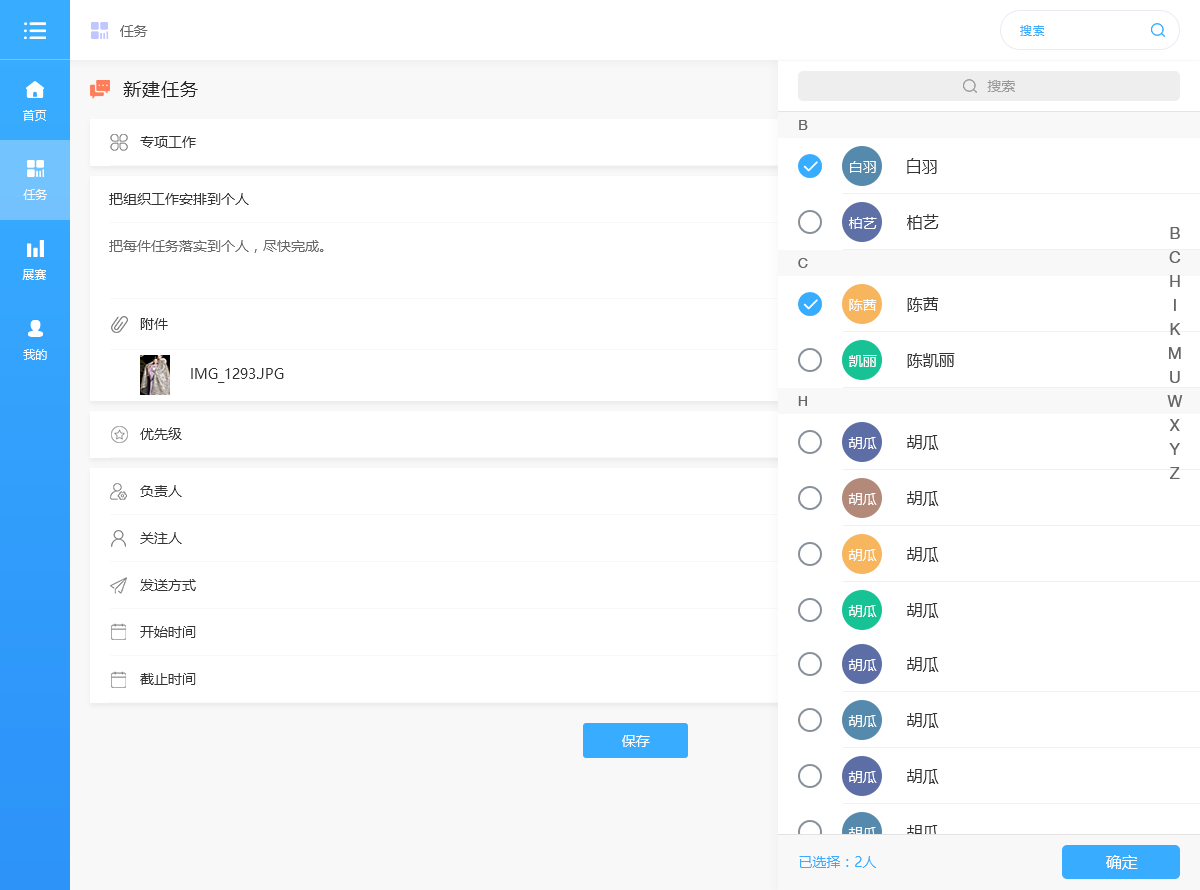
<style>
.page{position:relative;width:1200px;height:890px;background:#ffffff}
.page>*{position:absolute;margin:0}
.t1{font:14px "MicrosoftYaHei";color:#666666}
.t2{font:12px "MicrosoftYaHei";letter-spacing:0.05em;color:#38adff}
.t3{font:18px "MicrosoftYaHei";letter-spacing:0.05em;color:#222222}
.t4{font:14px "MicrosoftYaHei";color:#999999}
.t5{font:12px "MicrosoftYaHei";color:#ffffff}
.t6{font:14px "HelveticaNeueLTPro-Roman";color:#666666}
.t7{font:14px "MicrosoftYaHei";color:#333333}
.t8{font:14px "MicrosoftYaHei";color:#fffefe}
.t9{font:16px "MicrosoftYaHei";color:#333333}
.t10{font:16px/24px "HelveticaNeueLTPro-Roman";color:#666666}
.t11{font:14px "MicrosoftYaHei";color:#ffffff}
.t12{font:14px "MicrosoftYaHei";color:#38adff}
.t13{font:16px "MicrosoftYaHei";color:#ffffff}
</style>
<div class="page">
<p class="t1" style="left:120px;top:25px;width:28px;height:12px">任务</p>
<p class="t2" style="left:1020px;top:25px;width:25px;height:11px">搜索</p>
<p class="t3" style="left:123px;top:81px;width:75px;height:17px">新建任务</p>
<p class="t4" style="left:987px;top:80px;width:28px;height:12px">搜索</p>
<p class="t5" style="left:23px;top:110px;width:24px;height:11px">首页</p>
<p class="t6" style="left:799px;top:120px;width:9px;height:10px">B</p>
<p class="t7" style="left:140px;top:136px;width:56px;height:12px">专项工作</p>
<p class="t8" style="left:850px;top:161px;width:26px;height:12px">白羽</p>
<p class="t9" style="left:907px;top:158px;width:30px;height:16px">白羽</p>
<p class="t5" style="left:23px;top:189px;width:24px;height:11px">任务</p>
<p class="t7" style="left:109px;top:193px;width:140px;height:12px">把组织工作安排到个人</p>
<p class="t8" style="left:849px;top:217px;width:28px;height:12px">柏艺</p>
<p class="t9" style="left:907px;top:214px;width:32px;height:16px">柏艺</p>
<p class="t10" style="left:1167px;top:227px;width:16px;height:252px;text-align:center">B<br>C<br>H<br>I<br>K<br>M<br>U<br>W<br>X<br>Y<br>Z</p>
<p class="t1" style="left:109px;top:240px;width:215px;height:13px">把每件任务落实到个人，尽快完成。</p>
<p class="t5" style="left:22px;top:269px;width:24px;height:11px">展赛</p>
<p class="t6" style="left:798px;top:258px;width:10px;height:10px">C</p>
<p class="t8" style="left:849px;top:299px;width:28px;height:12px">陈茜</p>
<p class="t9" style="left:907px;top:297px;width:32px;height:15px">陈茜</p>
<p class="t7" style="left:140px;top:318px;width:28px;height:12px">附件</p>
<p class="t5" style="left:23px;top:349px;width:24px;height:11px">我的</p>
<p class="t9" style="left:907px;top:353px;width:48px;height:15px">陈凯丽</p>
<p class="t8" style="left:849px;top:355px;width:28px;height:12px">凯丽</p>
<p class="t7" style="left:191px;top:368px;width:93px;height:15px">IMG_1293.JPG</p>
<p class="t6" style="left:798px;top:396px;width:9px;height:10px">H</p>
<p class="t7" style="left:140px;top:427px;width:42px;height:13px">优先级</p>
<p class="t8" style="left:848px;top:437px;width:29px;height:12px">胡瓜</p>
<p class="t9" style="left:907px;top:435px;width:32px;height:15px">胡瓜</p>
<p class="t7" style="left:140px;top:485px;width:42px;height:12px">负责人</p>
<p class="t8" style="left:848px;top:493px;width:29px;height:12px">胡瓜</p>
<p class="t9" style="left:907px;top:491px;width:32px;height:15px">胡瓜</p>
<p class="t7" style="left:140px;top:532px;width:42px;height:12px">关注人</p>
<p class="t8" style="left:848px;top:549px;width:29px;height:12px">胡瓜</p>
<p class="t9" style="left:907px;top:547px;width:32px;height:15px">胡瓜</p>
<p class="t7" style="left:140px;top:579px;width:56px;height:12px">发送方式</p>
<p class="t8" style="left:848px;top:605px;width:29px;height:12px">胡瓜</p>
<p class="t9" style="left:907px;top:603px;width:32px;height:15px">胡瓜</p>
<p class="t7" style="left:140px;top:626px;width:56px;height:12px">开始时间</p>
<p class="t8" style="left:848px;top:659px;width:29px;height:12px">胡瓜</p>
<p class="t9" style="left:907px;top:657px;width:32px;height:15px">胡瓜</p>
<p class="t7" style="left:140px;top:673px;width:56px;height:12px">截止时间</p>
<p class="t9" style="left:907px;top:713px;width:32px;height:15px">胡瓜</p>
<p class="t8" style="left:848px;top:715px;width:29px;height:12px">胡瓜</p>
<p class="t11" style="left:622px;top:735px;width:28px;height:12px">保存</p>
<p class="t8" style="left:848px;top:771px;width:29px;height:12px">胡瓜</p>
<p class="t9" style="left:907px;top:769px;width:32px;height:15px">胡瓜</p>
<p class="t8" style="left:848px;top:827px;width:29px;height:12px">胡瓜</p>
<p class="t9" style="left:907px;top:825px;width:32px;height:15px">胡瓜</p>
<p class="t12" style="left:799px;top:856px;width:77px;height:12px">已选择：2人</p>
<p class="t13" style="left:1106px;top:855px;width:32px;height:15px">确定</p>
</div>
